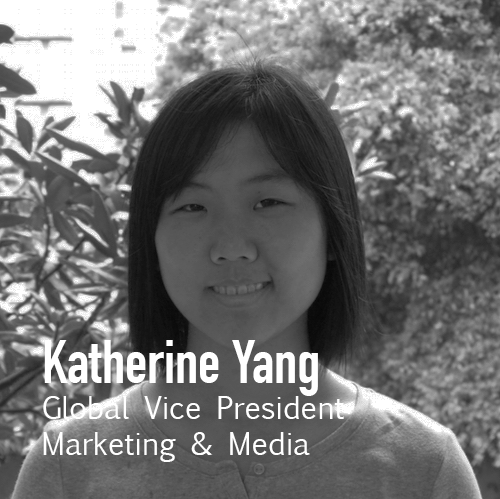
<style>
.page{position:relative;width:500px;height:499px}
.page>*{position:absolute;margin:0}
.t1{font:30px "EuphemiaUCAS";color:#ffffff}
.t2{font:60px "DINCondensed-Bold";color:#ffffff}
</style>
<div class="page">
<p class="t1" style="left:43px;top:340px;width:312px;height:122px"><span class="t2">Katherine Yang<br></span>Global Vice President-<br>Marketing &amp; Media</p>
</div>
